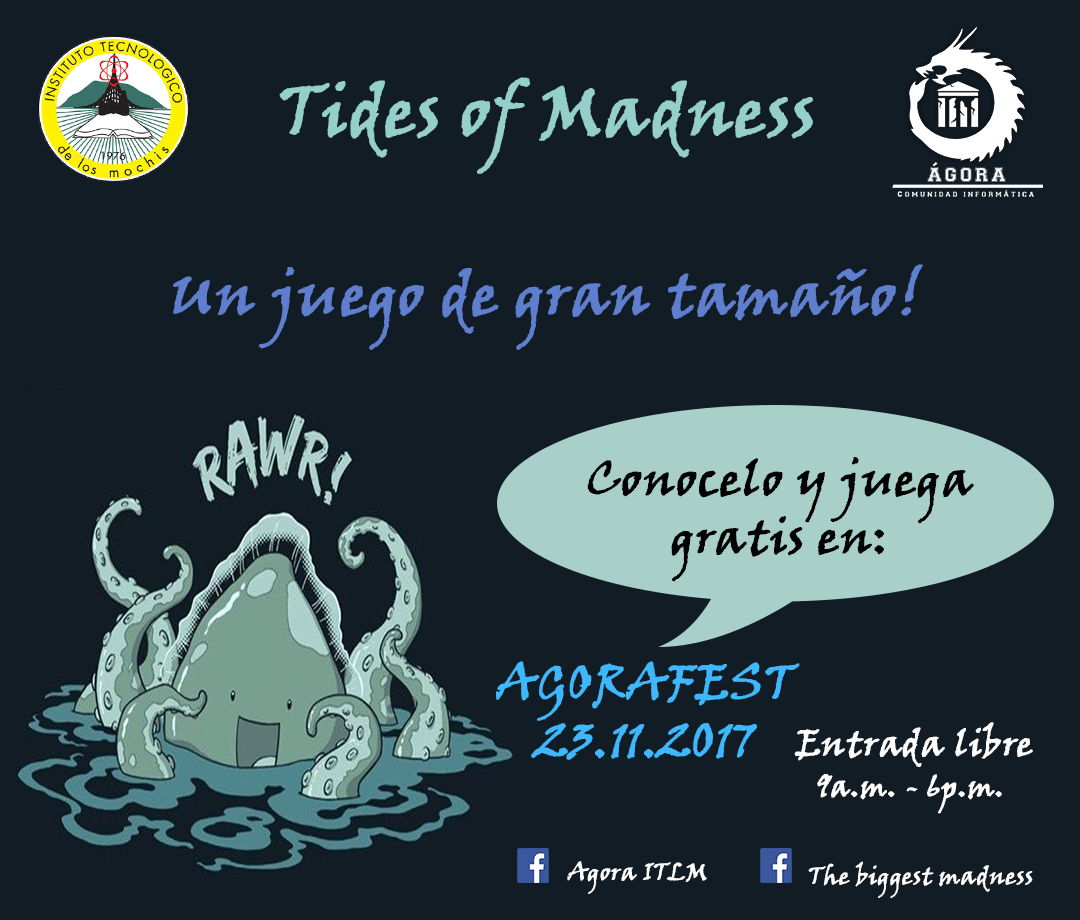
<style>
.page{position:relative;width:1080px;height:920px;background:#121c25}
.page>*{position:absolute;margin:0}
.t1{font:70px "VinerHandITC";color:#95cfca;font-weight:bold}
.t2{font:60px "VinerHandITC";color:#5f7ecd;font-weight:bold}
.t3{font:48px "VinerHandITC";color:#000000;font-weight:bold}
.t4{font:48px "VinerHandITC";color:#3eb7fc;font-weight:bold}
.t5{font:36px "VinerHandITC";color:#ffffff;font-weight:bold}
.t6{font:30px "VinerHandITC";color:#ffffff;font-weight:bold}
.t7{font:24px "VinerHandITC";color:#ffffff;font-weight:bold}
</style>
<div class="page">
<p class="t1" style="left:279px;top:77px;width:534px;height:97px">Tides of Madness</p>
<p class="t2" style="left:173px;top:264px;width:750px;height:86px">Un juego de gran tamaño!</p>
<p class="t3" style="left:587px;top:457px;width:387px;height:125px;text-align:center">Conocelo y juega gratis en:</p>
<p class="t4" style="left:496px;top:661px;width:304px;height:99px;text-align:center">AGORAFEST<br>23.11.2017</p>
<p class="t5" style="left:794px;top:722px;width:239px;height:45px">Entrada libre</p>
<p class="t6" style="left:817px;top:774px;width:185px;height:40px">9a.m. - 6p.m.</p>
<p class="t7" style="left:567px;top:861px;width:140px;height:33px">Agora ITLM</p>
<p class="t7" style="left:808px;top:861px;width:225px;height:37px">The biggest madness</p>
</div>
